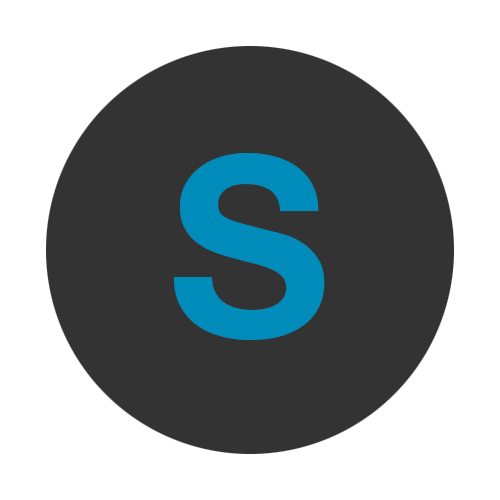
<style>
.page{position:relative;width:500px;height:500px;background:#ffffff}
.page>*{position:absolute;margin:0}
.t1{font:250px "HelveticaNeue-Bold";color:#008cba}
</style>
<div class="page">
<p class="t1" style="left:174px;top:153px;width:151px;height:187px">S</p>
</div>
